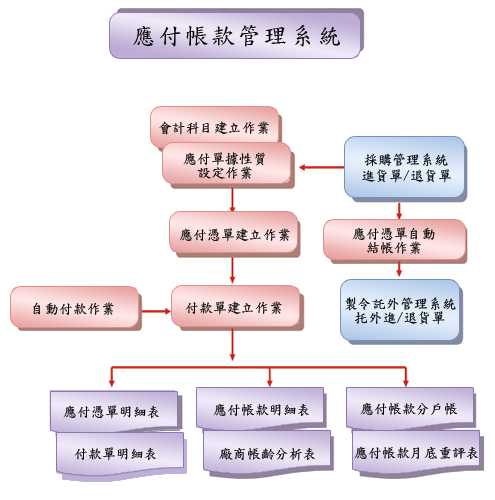
<style>
.page{position:relative;width:495px;height:500px;background:#ffffff}
.page>*{position:absolute;margin:0}
.t1{font:24px "DFKaiShu-SB-Estd-BF";letter-spacing:0.1em;color:#010101}
.t2{font:14px "DFKaiShu-SB-Estd-BF";color:#000000}
.t3{font:14px/14px "DFKaiShu-SB-Estd-BF";color:#000000}
</style>
<div class="page">
<p class="t1" style="left:133px;top:25px;width:207px;height:22px">應付帳款管理系統</p>
<p class="t2" style="left:159px;top:121px;width:110px;height:14px">會計科目建立作業</p>
<p class="t3" style="left:183px;top:152px;width:82px;height:27px;text-align:center">應付單據性質<br>設定作業</p>
<p class="t2" style="left:364px;top:153px;width:84px;height:13px">採購管理系統</p>
<p class="t2" style="left:362px;top:169px;width:89px;height:14px">進貨單/退貨單</p>
<p class="t2" style="left:179px;top:228px;width:111px;height:14px">應付憑單建立作業</p>
<p class="t3" style="left:352px;top:227px;width:83px;height:27px;text-align:center">應付憑單自動<br>結帳作業</p>
<p class="t2" style="left:33px;top:302px;width:81px;height:13px">自動付款作業</p>
<p class="t2" style="left:185px;top:301px;width:97px;height:14px">付款單建立作業</p>
<p class="t3" style="left:345px;top:297px;width:111px;height:28px;text-align:center">製令託外管理系統<br>托外進/退貨單</p>
<p class="t2" style="left:63px;top:405px;width:96px;height:14px">應付憑單明細表</p>
<p class="t2" style="left:213px;top:403px;width:96px;height:13px">應付帳款明細表</p>
<p class="t2" style="left:360px;top:402px;width:98px;height:13px">應付帳款分戶帳</p>
<p class="t2" style="left:74px;top:447px;width:82px;height:14px">付款單明細表</p>
<p class="t2" style="left:219px;top:447px;width:96px;height:14px">廠商帳齡分析表</p>
<p class="t2" style="left:354px;top:446px;width:124px;height:13px">應付帳款月底重評表</p>
</div>
